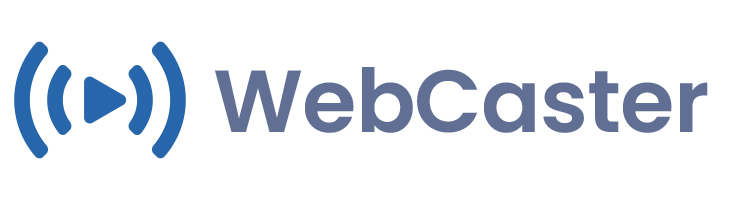
<style>
.page{position:relative;width:730px;height:200px;background:#ffffff}
.page>*{position:absolute;margin:0}
.t1{font:88px "Poppins-SemiBold";letter-spacing:-0.01em;color:#616f94}
</style>
<div class="page">
<p class="t1" style="left:215px;top:67px;width:493px;height:66px">WebCaster</p>
</div>
